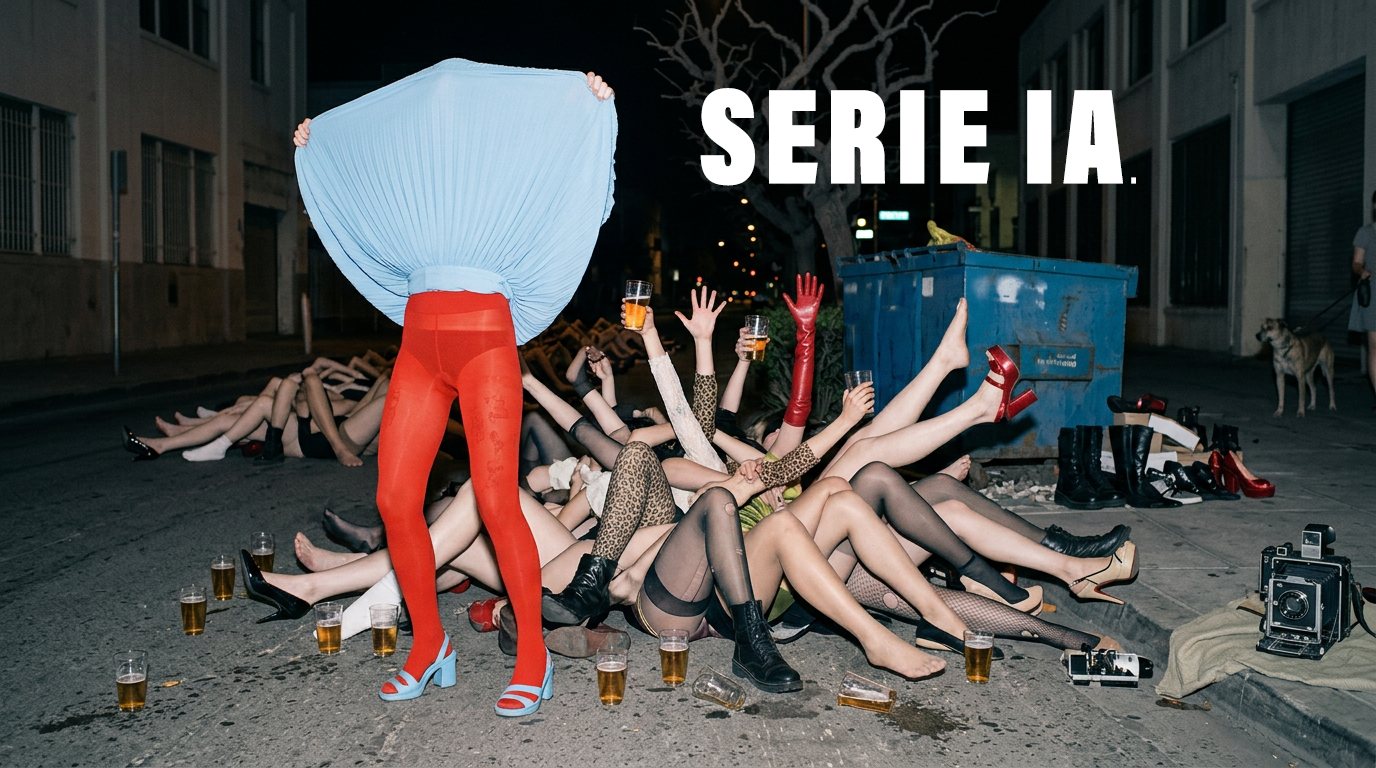
<style>
.page{position:relative;width:1376px;height:768px}
.page>*{position:absolute;margin:0}
.t1{font:138px "AcuminProCond-UltraBlack";letter-spacing:0.06em;color:#ffffff;scale:0.87 1}
.t2{font:27.6px "AcuminProCond-UltraBlack";letter-spacing:0.06em;color:#ffffff;scale:0.87 1}
</style>
<div class="page">
<p class="t1" style="left:700px;top:88px;width:436px;height:98px">SERIE IA<span class="t2">.</span></p>
</div>
